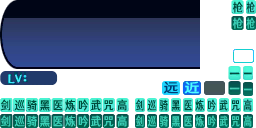
<style>
.page{position:relative;width:256px;height:128px;background:#ffffff}
.page>*{position:absolute;margin:0}
.t1{font:12px "HYWenHei-FEW";letter-spacing:0.345em;color:#004c3c;scale:0.85 1}
.t2{font:12px "HYWenHei-FEW";letter-spacing:0.345em;color:#004c3c;scale:0.7 1}
.t3{font:12px "HYWenHei-FEW";letter-spacing:0.345em;color:#3acfb6;scale:0.85 1}
.t4{font:12px "HYWenHei-FEW";letter-spacing:0.345em;color:#3acfb6;scale:0.7 1}
.t5{font:13.3px "HYWenHei-FEW";letter-spacing:0.425em;color:#003b74;scale:1.1 1}
.t6{font:13.3px "HYWenHei-FEW";letter-spacing:0.425em;color:#4cffff;scale:1.1 1}
.t7{font:12px "HYWenHei-FEW";letter-spacing:-0.04em;color:#004c3c;scale:0.85 1}
.t8{font:12px "HYWenHei-FEW";letter-spacing:0.06em;color:#004c3c;scale:0.85 1}
.t9{font:12px "HYWenHei-FEW";letter-spacing:-0.06em;color:#004c3c;scale:0.85 1}
.t10{font:12px "HYWenHei-FEW";color:#004c3c;scale:0.85 1}
.t11{font:12px "HYWenHei-FEW";letter-spacing:0.045em;color:#004c3c;scale:0.7 1}
.t12{font:12px "HYWenHei-FEW";letter-spacing:0.045em;color:#004c3c;scale:0.71 1}
.t13{font:12px "HYWenHei-FEW";letter-spacing:-0.04em;color:#3acfb6;scale:0.85 1}
.t14{font:12px "HYWenHei-FEW";letter-spacing:0.06em;color:#3acfb6;scale:0.85 1}
.t15{font:12px "HYWenHei-FEW";letter-spacing:-0.06em;color:#3acfb6;scale:0.85 1}
.t16{font:12px "HYWenHei-FEW";color:#3acfb6;scale:0.85 1}
</style>
<div class="page">
<p class="t1" style="left:232px;top:1px;width:23px;height:12px">枪<span class="t2">枪</span></p>
<p class="t3" style="left:232px;top:17px;width:23px;height:12px">枪<span class="t4">枪</span></p>
<p class="t5" style="left:164px;top:81px;width:35px;height:13px">远<span class="t6">近</span></p>
<p class="t7" style="left:0px;top:99px;width:127px;height:12px"><span class="t8">剑 </span><span class="t9">巡 </span>骑 黑 医 炼 吟 武 <span class="t10">咒 高</span></p>
<p class="t11" style="left:135px;top:99px;width:117px;height:12px">剑 巡 骑 黑 医 炼 吟 武 <span class="t12">咒 高</span></p>
<p class="t13" style="left:0px;top:115px;width:127px;height:12px"><span class="t14">剑 </span><span class="t15">巡 </span>骑 黑 医 炼 吟 武 <span class="t16">咒 高</span></p>
</div>
